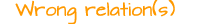
<style>
.page{position:relative;width:200px;height:24px;background:#ffffff}
.page>*{position:absolute;margin:0}
.t1{font:16px "ArchitectsDaughter";color:#ff9900}
</style>
<div class="page">
<p class="t1" style="left:15px;top:0px;width:160px;height:25px">Wrong relation(s)</p>
</div>
